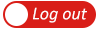
<style>
.page{position:relative;width:100px;height:30px;background:#d91e18}
.page>*{position:absolute;margin:0}
.t1{font:18px "Calibri-Italic";color:#ffffff}
</style>
<div class="page">
<p class="t1" style="left:33px;top:7px;width:54px;height:16px">Log out</p>
</div>
